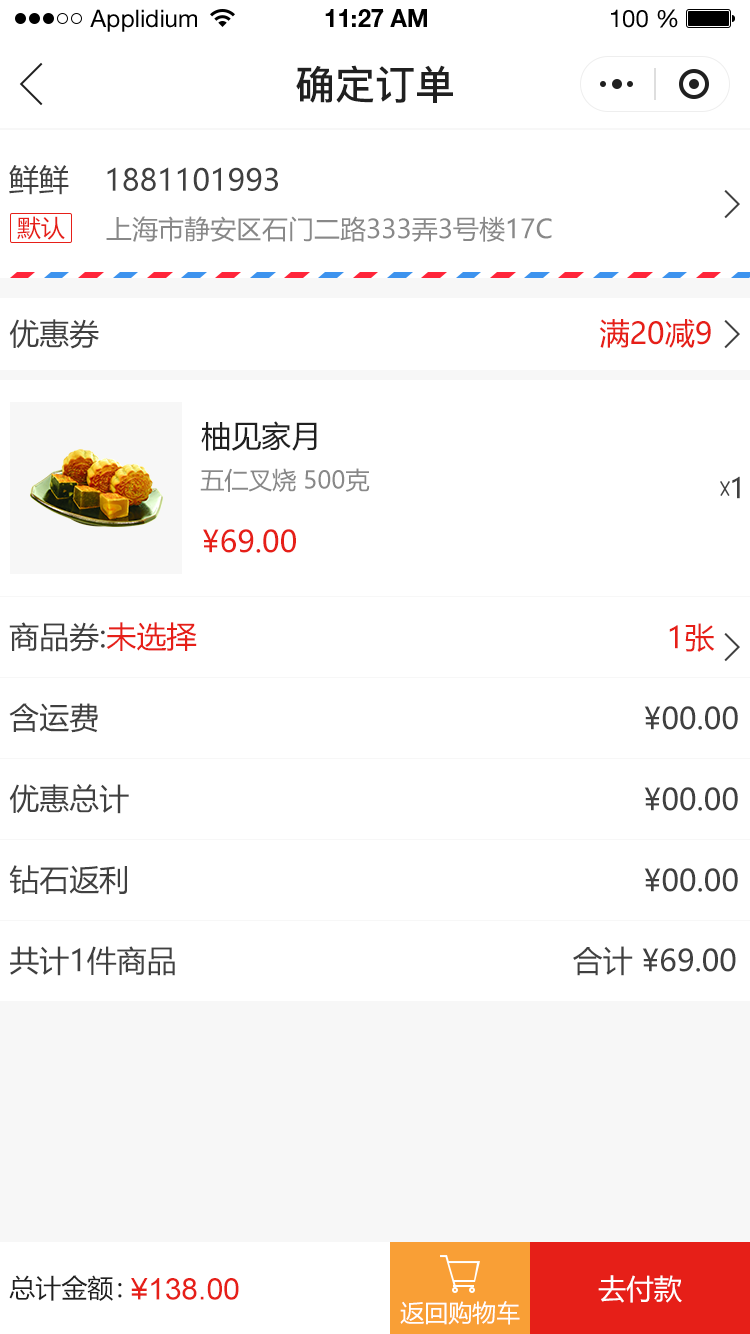
<style>
.page{position:relative;width:750px;height:1334px;background:#ffffff}
.page>*{position:absolute;margin:0}
.t1{font:24px "HelveticaNeueLTStd-Roman";color:#000000}
.t2{font:24px "HelveticaNeueLTStd-Bd";color:#000000}
.t3{font:40px "PingFang-SC-Bold";color:#202020;text-transform:uppercase}
.t4{font:30px "MicrosoftYaHei";color:#404040;text-transform:uppercase}
.t5{font:24px "MicrosoftYaHei";color:#e61f18;text-transform:uppercase}
.t6{font:26px "MicrosoftYaHei";color:#888888;text-transform:uppercase}
.t7{font:30px "MicrosoftYaHei";color:#e61f18;text-transform:uppercase}
.t8{font:30px "MicrosoftYaHei";color:#202020;text-transform:uppercase}
.t9{font:24px "MicrosoftYaHei";color:#888888;text-transform:uppercase}
.t10{font:28px "MicrosoftYaHei";color:#404040;text-transform:uppercase}
.t11{font:26px "MicrosoftYaHei";color:#202020;text-transform:uppercase}
.t12{font:30px "ArialMT";color:#e61f18;text-transform:uppercase}
.t13{font:28px "MicrosoftYaHei";color:#fffefe;text-transform:uppercase}
.t14{font:24px "MicrosoftYaHei";color:#fffefe;text-transform:uppercase}
</style>
<div class="page">
<p class="t1" style="left:90px;top:9px;width:107px;height:23px">Applidium</p>
<p class="t2" style="left:325px;top:9px;width:102px;height:18px">11:27 AM</p>
<p class="t1" style="left:611px;top:9px;width:67px;height:19px">100 %</p>
<p class="t3" style="left:296px;top:65px;width:157px;height:38px">确定订单</p>
<p class="t4" style="left:9px;top:165px;width:60px;height:30px">鲜鲜</p>
<p class="t4" style="left:107px;top:167px;width:171px;height:24px">1881101993</p>
<p class="t5" style="left:17px;top:216px;width:48px;height:24px">默认</p>
<p class="t6" style="left:106px;top:216px;width:446px;height:26px">上海市静安区石门二路333弄3号楼17c</p>
<p class="t4" style="left:9px;top:319px;width:90px;height:30px">优惠券</p>
<p class="t7" style="left:599px;top:319px;width:112px;height:29px">满20减9</p>
<p class="t8" style="left:201px;top:421px;width:116px;height:30px">柚见家月</p>
<p class="t9" style="left:200px;top:468px;width:170px;height:24px">五仁叉烧 500克</p>
<p class="t10" style="left:732px;top:476px;width:8px;height:23px">1</p>
<p class="t7" style="left:203px;top:529px;width:93px;height:24px">¥69.00</p>
<p class="t4" style="left:9px;top:622px;width:188px;height:30px">商品券:<span class="t7">未选择</span></p>
<p class="t7" style="left:669px;top:623px;width:46px;height:29px">1张</p>
<p class="t4" style="left:9px;top:703px;width:89px;height:30px">含运费</p>
<p class="t4" style="left:644px;top:706px;width:94px;height:24px">¥00.00</p>
<p class="t4" style="left:9px;top:784px;width:120px;height:30px">优惠总计</p>
<p class="t4" style="left:644px;top:787px;width:94px;height:24px">¥00.00</p>
<p class="t4" style="left:9px;top:865px;width:118px;height:30px">钻石返利</p>
<p class="t4" style="left:644px;top:868px;width:94px;height:24px">¥00.00</p>
<p class="t4" style="left:10px;top:946px;width:165px;height:30px">共计1件商品</p>
<p class="t4" style="left:573px;top:946px;width:163px;height:30px">合计 ¥69.00</p>
<p class="t11" style="left:9px;top:1275px;width:113px;height:26px">总计金额：</p>
<p class="t12" style="left:131px;top:1278px;width:108px;height:22px">¥138.00</p>
<p class="t13" style="left:598px;top:1275px;width:84px;height:28px">去付款</p>
<p class="t14" style="left:400px;top:1301px;width:120px;height:24px">返回购物车</p>
</div>
